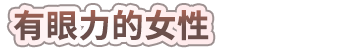
<style>
.page{position:relative;width:360px;height:50px;background:#ffffff}
.page>*{position:absolute;margin:0}
.t1{font:32px "SourceHanSansSC-Bold";color:#73534d;font-weight:bold}
</style>
<div class="page">
<p class="t1" style="left:13px;top:9px;width:196px;height:32px">有眼力的女性</p>
</div>
